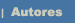
<style>
.page{position:relative;width:75px;height:23px;background:#4775a3}
.page>*{position:absolute;margin:0}
.t1{font:12px "Arial-Black";color:#cdccba}
.t2{font:10px "Arial-Black";color:#cdccba}
</style>
<div class="page">
<p class="t1" style="left:1px;top:7px;width:62px;height:11px"><span class="t2">| </span> Autores</p>
</div>
